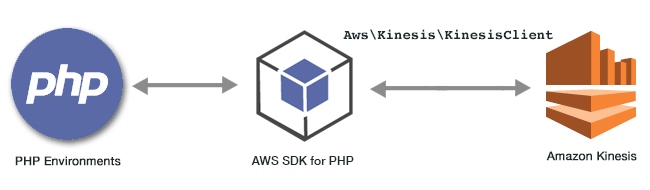
<style>
.page{position:relative;width:650px;height:190px;background:#ffffff}
.page>*{position:absolute;margin:0}
.t1{font:14px "Courier-Bold";color:#1d2a2e}
.t2{font:12px "HelveticaNeue";color:#1d2a2e;font-weight:bold}
.t3{font:12.1px "HelveticaNeue-Medium";color:#1d2a2e}
</style>
<div class="page">
<p class="t1" style="left:343px;top:29px;width:210px;height:11px">Aws\Kinesis\KinesisClient</p>
<p class="t2" style="left:15px;top:156px;width:106px;height:10px">PHP Environments</p>
<p class="t3" style="left:251px;top:156px;width:103px;height:9px">AWS SDK for PHP</p>
<p class="t2" style="left:546px;top:151px;width:91px;height:10px">Amazon Kinesis</p>
</div>
